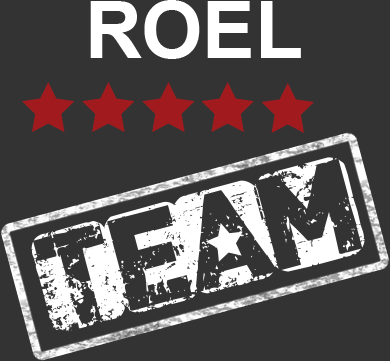
<style>
.page{position:relative;width:390px;height:361px;background:#333333}
.page>*{position:absolute;margin:0}
.t1{font:78.6px "Arial-BoldMT";color:#ffffff}
.t2{font:118.6px "CFPunkisnotDead-Regular";color:#ffffff}
</style>
<div class="page">
<p class="t1" style="left:90px;top:0px;width:211px;height:59px">ROEL</p>
<p class="t2" style="left:31px;top:157px;width:334px;height:175px;rotate:-15deg">team</p>
</div>
